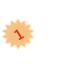
<style>
.page{position:relative;width:64px;height:64px;background:#ffffff}
.page>*{position:absolute;margin:0}
.t1{font:13.9px "SegoeCondensed";color:#d73c0c;font-weight:bold;scale:1.23 1}
</style>
<div class="page">
<p class="t1" style="left:14px;top:29px;width:11px;height:11px;rotate:-27deg">1</p>
</div>
